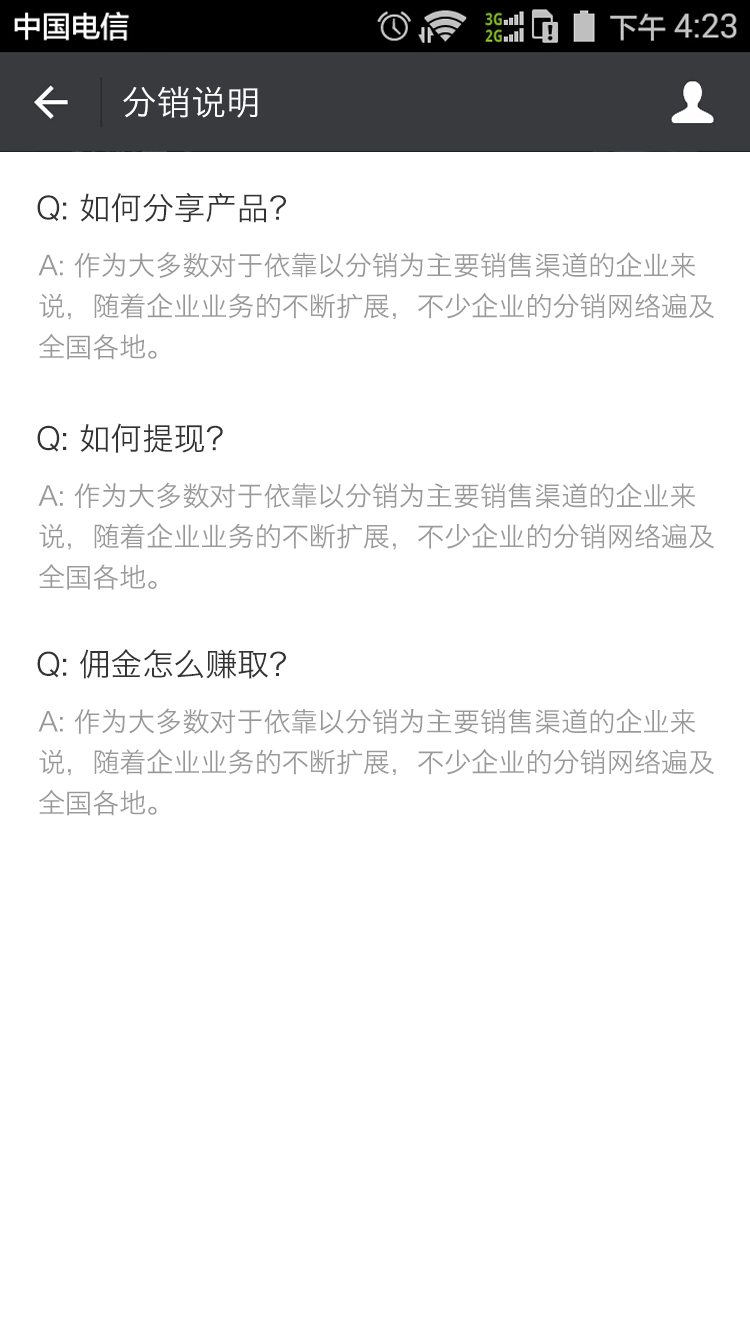
<style>
.page{position:relative;width:750px;height:1334px;background:#ffffff}
.page>*{position:absolute;margin:0}
.t1{font:34px "HiraginoSansGB-W3";letter-spacing:0.022em;color:#ffffff}
.t2{font:31.6px "HiraginoSansGB-W3";color:#333333}
.t3{font:27.1px/40.6px "HiraginoSansGB-W3";color:#999999}
</style>
<div class="page">
<p class="t1" style="left:123px;top:86px;width:135px;height:32px">分销说明</p>
<p class="t2" style="left:37px;top:192px;width:249px;height:31px">Q: 如何分享产品？</p>
<p class="t3" style="left:38px;top:252px;width:676px;height:108px">A: 作为大多数对于依靠以分销为主要销售渠道的企业来说，随着企业业务的不断扩展，不少企业的分销网络遍及全国各地。</p>
<p class="t2" style="left:37px;top:423px;width:186px;height:30px">Q: 如何提现？</p>
<p class="t3" style="left:38px;top:482px;width:676px;height:108px">A: 作为大多数对于依靠以分销为主要销售渠道的企业来说，随着企业业务的不断扩展，不少企业的分销网络遍及全国各地。</p>
<p class="t2" style="left:37px;top:649px;width:249px;height:30px">Q: 佣金怎么赚取？</p>
<p class="t3" style="left:38px;top:708px;width:676px;height:108px">A: 作为大多数对于依靠以分销为主要销售渠道的企业来说，随着企业业务的不断扩展，不少企业的分销网络遍及全国各地。</p>
</div>
